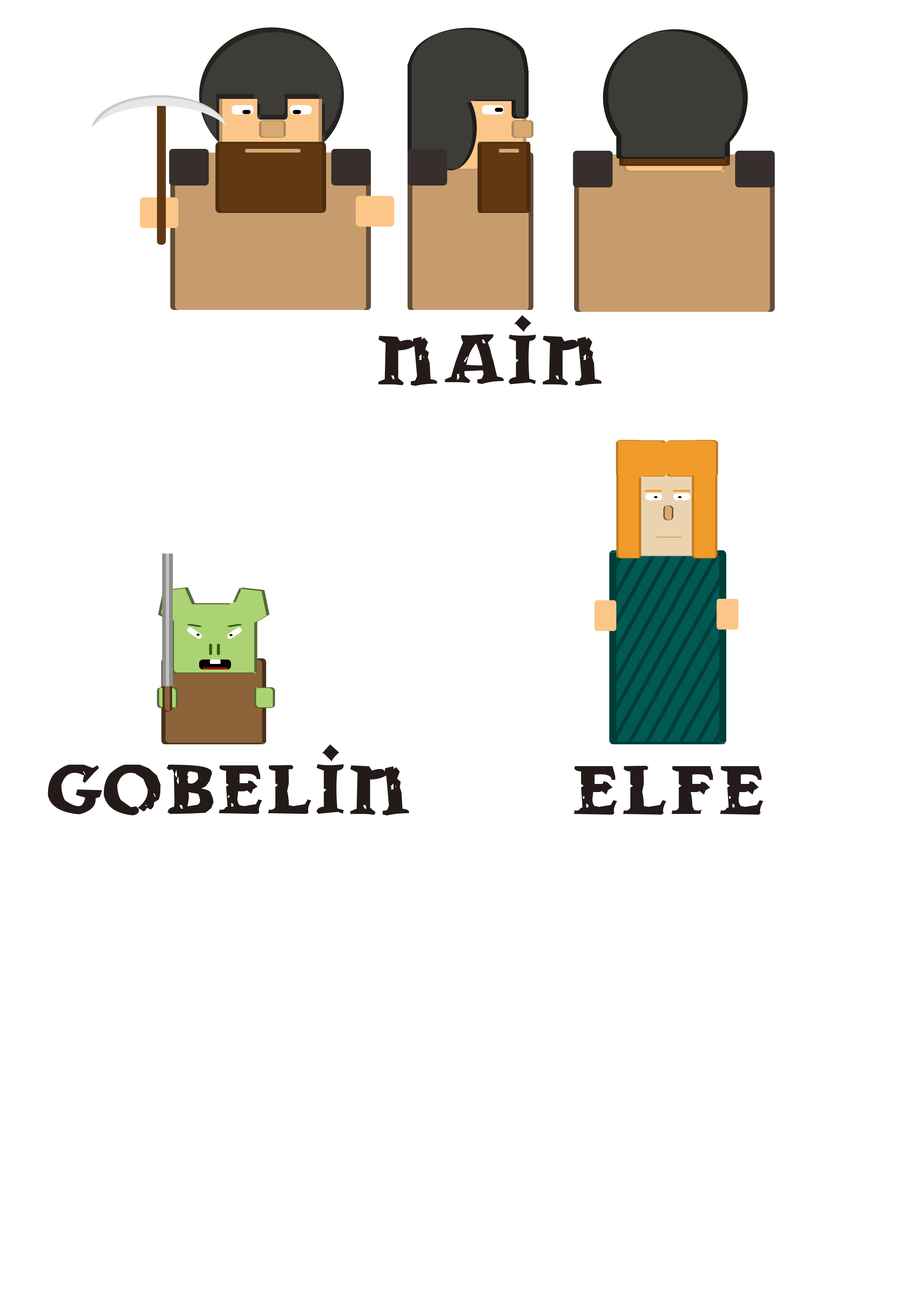
<style>
.page{position:relative;width:918px;height:1299px;background:#ffffff}
.page>*{position:absolute;margin:0}
.t1{font:92.6px "drwnstcr";color:#251a1a}
</style>
<div class="page">
<p class="t1" style="left:378px;top:315px;width:224px;height:71px">Nain</p>
<p class="t1" style="left:48px;top:744px;width:361px;height:71px">Gobelin</p>
<p class="t1" style="left:574px;top:766px;width:189px;height:48px">Elfe</p>
</div>
